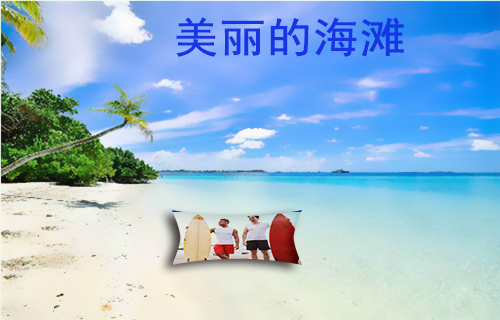
<style>
.page{position:relative;width:500px;height:320px}
.page>*{position:absolute;margin:0}
.t1{font:41.8px "SimHei";color:#1735e4;font-weight:bold;scale:1.09 1}
</style>
<div class="page">
<p class="t1" style="left:176px;top:17px;width:228px;height:40px">美丽的海滩</p>
</div>
